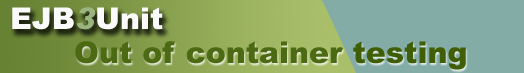
<style>
.page{position:relative;width:524px;height:73px;background:#83aca6}
.page>*{position:absolute;margin:0}
.t1{font:30px "Arial-Black";color:#fbfafa}
.t2{font:30px "Arial-BlackItalic";color:#9ab47f}
.t3{font:30px "Arial-Black";color:#4c6913}
.t4{font:30px "Arial-Black";color:#405e06}
</style>
<div class="page">
<p class="t1" style="left:12px;top:7px;width:151px;height:23px">EJB<span class="t2">3</span>Unit</p>
<p class="t3" style="left:75px;top:41px;width:391px;height:29px">Out of container <span class="t4">testing</span></p>
</div>
